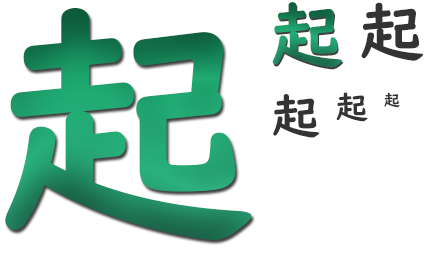
<style>
.page{position:relative;width:424px;height:256px;background:#ffffff}
.page>*{position:absolute;margin:0}
.t1{font:72px "UDDigiKyokashoN-B"}
.t2{font:64px "UDDigiKyokashoN-B";color:#333333}
.t3{font:256px "UDDigiKyokashoN-B"}
.t4{font:48px "UDDigiKyokashoN-B";color:#333333}
.t5{font:32px "UDDigiKyokashoN-B";color:#333333}
.t6{font:16px "UDDigiKyokashoN-B";color:#333333}
</style>
<div class="page">
<p class="t1" style="left:272px;top:2px;width:70px;height:66px">起</p>
<p class="t2" style="left:361px;top:2px;width:62px;height:59px">起</p>
<p class="t3" style="left:5px;top:8px;width:247px;height:232px">起</p>
<p class="t4" style="left:273px;top:94px;width:47px;height:44px">起</p>
<p class="t5" style="left:336px;top:92px;width:32px;height:30px">起</p>
<p class="t6" style="left:384px;top:92px;width:16px;height:16px">起</p>
</div>
